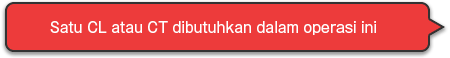
<style>
.page{position:relative;width:450px;height:58px;background:#ed3b3b}
.page>*{position:absolute;margin:0}
.t1{font:14px "GothicMB101Pro-Regular";color:#ffffff}
</style>
<div class="page">
<p class="t1" style="left:50px;top:21px;width:326px;height:14px">Satu CL atau CT dibutuhkan dalam operasi ini</p>
</div>
